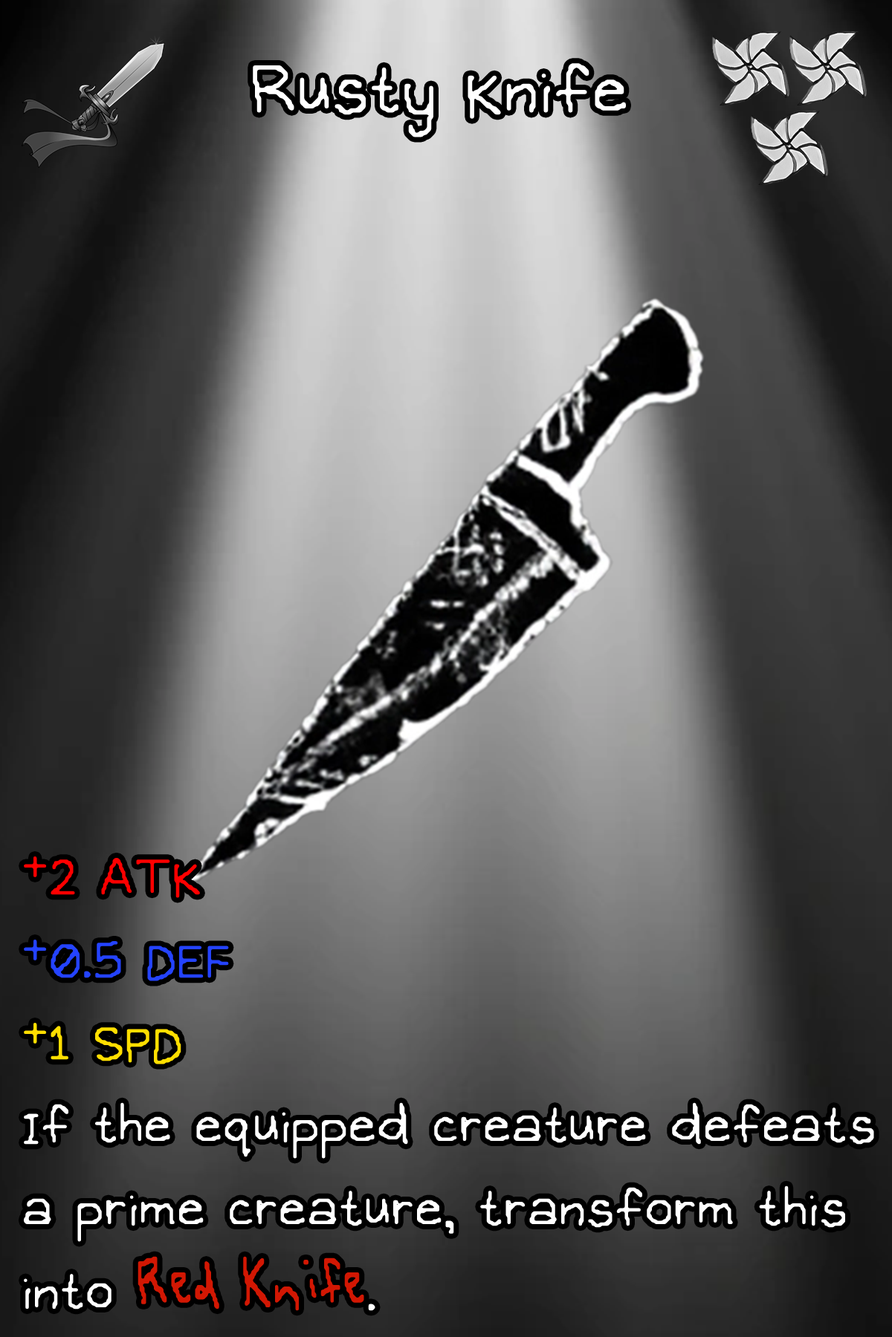
<style>
.page{position:relative;width:892px;height:1337px}
.page>*{position:absolute;margin:0}
.t1{font:170.9px "OMORI_GAME";color:#ffffff}
.t2{font:132.3px/83.2px "OMORI_GAME";color:#ffffff}
.t3{font:132.3px/83.2px "OMORI_GAME";color:#ff0000}
.t4{font:132.3px/83.2px "OMORI_GAME";color:#2443ff}
.t5{font:132.3px/83.2px "OMORI_GAME";color:#ffde00}
.t6{font:132.3px/83.2px "OMORI_GAME2";color:#d21703}
</style>
<div class="page">
<p class="t1" style="left:253px;top:63px;width:373px;height:74px">Rusty Knife</p>
<p class="t2" style="left:24px;top:857px;width:850px;height:454px"><span class="t3">+2 ATK<br></span><span class="t4">+0.5 DEF<br></span><span class="t5">+1 SPD<br></span>If the equipped creature defeats a prime creature, transform this into <span class="t6">Red Knife</span>.</p>
</div>
